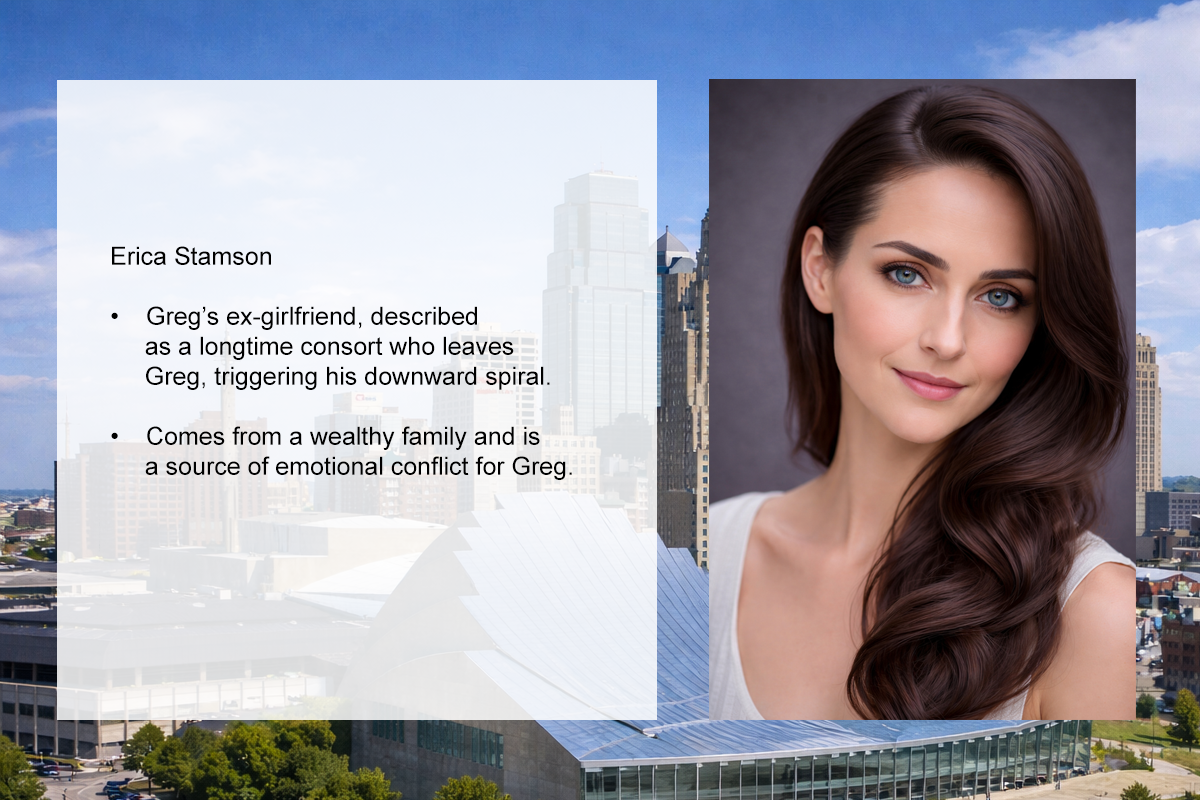
<style>
.page{position:relative;width:1200px;height:800px}
.page>*{position:absolute;margin:0}
.t1{font:25px "ArialMT";color:#000000}
</style>
<div class="page">
<p class="t1" style="left:111px;top:246px;width:461px;height:234px">Erica Stamson<br><br>• Greg’s ex-girlfriend, described <br>     as a longtime consort who leaves <br>     Greg, triggering his downward spiral.<br><br>• Comes from a wealthy family and is <br>     a source of emotional conflict for Greg.</p>
</div>
